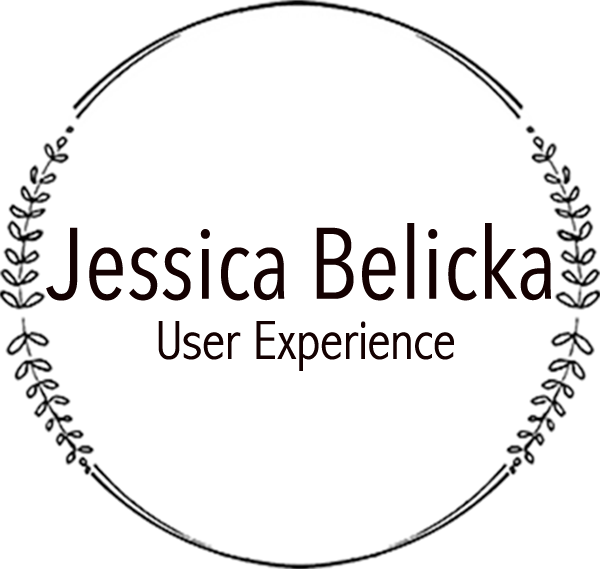
<style>
.page{position:relative;width:600px;height:569px;background:#ffffff}
.page>*{position:absolute;margin:0}
.t1{font:100px "AvenirNextCondensed-Regular";color:#140101}
.t2{font:55.6px "AbadiMT-CondensedLight";color:#140101}
</style>
<div class="page">
<p class="t1" style="left:46px;top:223px;width:505px;height:78px">Jessica Belicka</p>
<p class="t2" style="left:158px;top:321px;width:296px;height:50px">User Experience</p>
</div>
